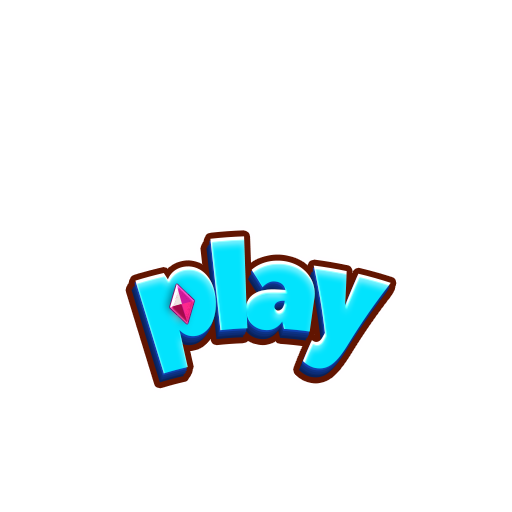
<style>
.page{position:relative;width:512px;height:512px;background:#ffffff}
.page>*{position:absolute;margin:0}
.t1{font:124.6px "PeaceSans";letter-spacing:-0.075em;color:#02e3fd;scale:0.77 1}
</style>
<div class="page">
<p class="t1" style="left:135px;top:236px;width:256px;height:138px">play</p>
</div>
